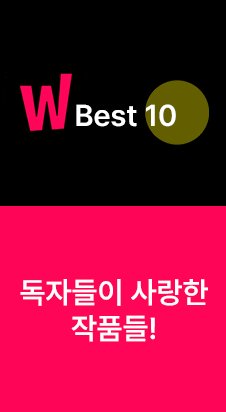
<style>
.page{position:relative;width:226px;height:412px;background:#ff0558}
.page>*{position:absolute;margin:0}
.t1{font:30px "Pretendard-SemiBold";color:#ffffff}
</style>
<div class="page">
<p class="t1" style="left:76px;top:104px;width:100px;height:23px">Best 10</p>
<p class="t1" style="left:20px;top:279px;width:188px;height:63px;text-align:center">독자들이 사랑한<br>작품들!</p>
</div>
